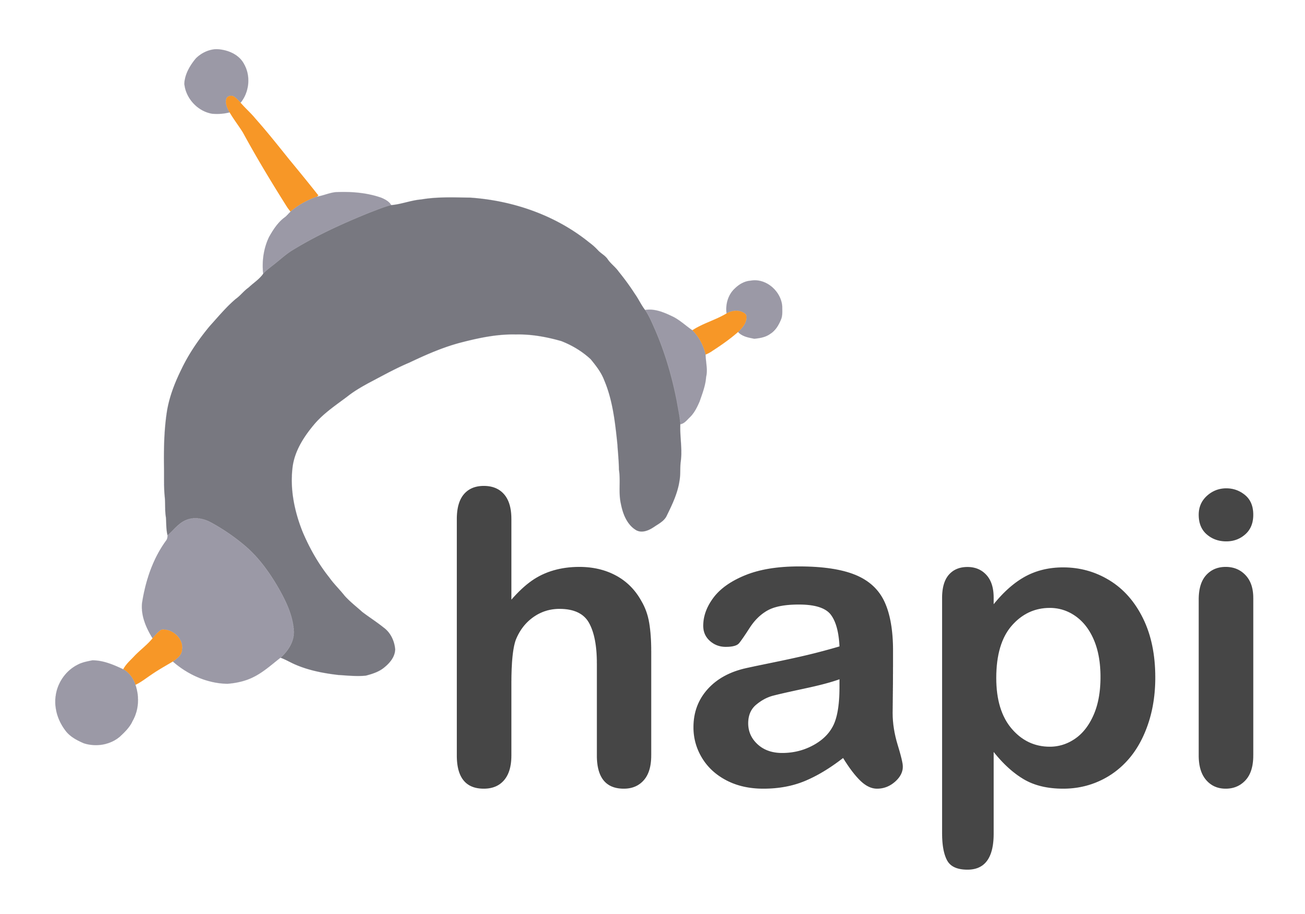
<style>
.page{position:relative;width:1305px;height:914px;background:#ffffff}
.page>*{position:absolute;margin:0}
.t1{font:409.3px "ArialRoundedMTBold";color:#464646}
</style>
<div class="page">
<p class="t1" style="left:456px;top:486px;width:797px;height:383px">hapi</p>
</div>
